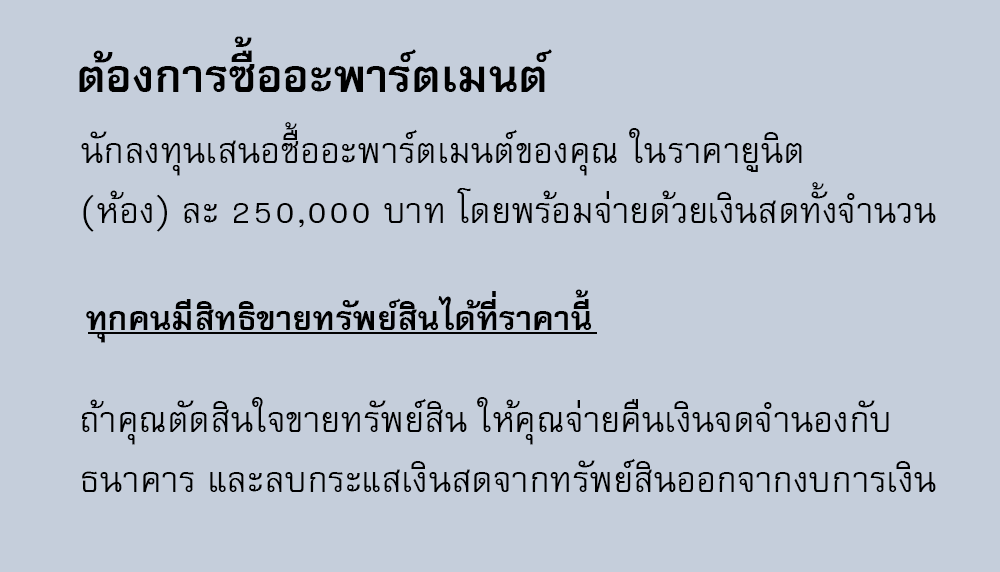
<style>
.page{position:relative;width:1000px;height:572px;background:#c5cedb}
.page>*{position:absolute;margin:0}
.t1{font:64px "FreesiaUPCBold";color:#000000}
.t2{font:50px/60px "FreesiaUPC";color:#000000}
.t3{font:47px "FreesiaUPCBold";color:#000000}
</style>
<div class="page">
<p class="t1" style="left:79px;top:36px;width:473px;height:56px">ต้องการซื้ออะพาร์ตเมนต์</p>
<p class="t2" style="left:81px;top:122px;width:855px;height:110px">นักลงทุนเสนอซื้ออะพาร์ตเมนต์ของคุณ ในราคายูนิต<br>(ห้อง) ละ 250,000 บาท โดยพร้อมจ่ายด้วยเงินสดทั้งจำนวน</p>
<p class="t3" style="left:86px;top:289px;width:506px;height:54px">ทุกคนมีสิทธิขายทรัพย์สินได้ที่ราคานี้</p>
<p class="t2" style="left:82px;top:397px;width:854px;height:95px">ถ้าคุณตัดสินใจขายทรัพย์สิน ให้คุณจ่ายคืนเงินจดจำนองกับ<br>ธนาคาร และลบกระแสเงินสดจากทรัพย์สินออกจากงบการเงิน</p>
</div>
